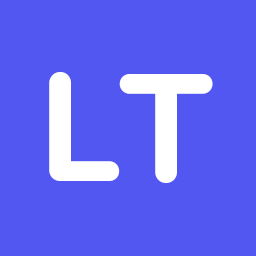
<style>
.page{position:relative;width:256px;height:256px;background:#5257f2}
.page>*{position:absolute;margin:0}
.t1{font:162px "CeraRoundProDEMO-Bold";letter-spacing:0.08em;color:#ffffff}
</style>
<div class="page">
<p class="t1" style="left:49px;top:72px;width:164px;height:111px">LT</p>
</div>
